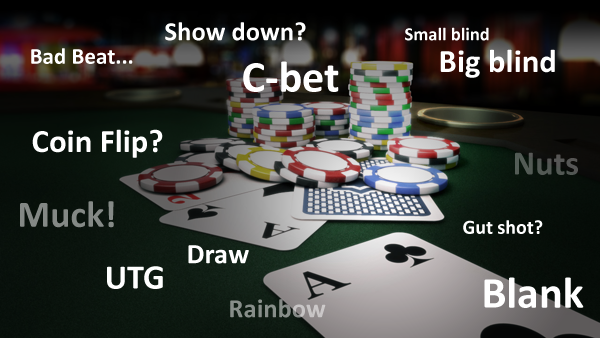
<style>
.page{position:relative;width:600px;height:338px}
.page>*{position:absolute;margin:0}
.t1{font:26.6px "Calibri-Bold";color:#ffffff}
.t2{font:18.5px "Calibri-Bold";color:#ffffff}
.t3{font:23.1px "Calibri-Bold";color:#ffffff}
.t4{font:32.8px "Calibri-Bold";color:#ffffff}
.t5{font:44.1px "Calibri-Bold";color:#ffffff}
.t6{font:34.2px "Calibri-Bold";color:#535955}
.t7{font:37.5px "Calibri-Bold";color:#848986}
.t8{font:19.9px "Calibri-Bold";color:#ffffff}
.t9{font:28.6px "Calibri-Bold";color:#ffffff}
.t10{font:34.2px "Calibri-Bold";color:#ffffff}
.t11{font:26.6px "Calibri-Bold";color:#888e8a}
</style>
<div class="page">
<p class="t1" style="left:165px;top:22px;width:141px;height:19px">Show down?</p>
<p class="t2" style="left:405px;top:27px;width:84px;height:14px">Small blind</p>
<p class="t3" style="left:31px;top:48px;width:102px;height:16px">Bad Beat...</p>
<p class="t4" style="left:440px;top:49px;width:115px;height:29px">Big blind</p>
<p class="t5" style="left:243px;top:61px;width:96px;height:31px">C-bet</p>
<p class="t4" style="left:32px;top:129px;width:131px;height:29px">Coin Flip?</p>
<p class="t6" style="left:515px;top:152px;width:63px;height:23px">Nuts</p>
<p class="t7" style="left:20px;top:201px;width:94px;height:27px">Muck!</p>
<p class="t8" style="left:463px;top:220px;width:80px;height:14px">Gut shot?</p>
<p class="t9" style="left:188px;top:245px;width:61px;height:19px">Draw</p>
<p class="t10" style="left:107px;top:266px;width:56px;height:23px">UTG</p>
<p class="t5" style="left:484px;top:277px;width:100px;height:31px">Blank</p>
<p class="t11" style="left:230px;top:299px;width:96px;height:19px">Rainbow</p>
</div>
